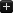
<style>
.page{position:relative;width:13px;height:14px}
.page>*{position:absolute;margin:0}
.t1{font:11.8px "TimesNewRomanPSMT";color:#dbdbdb}
</style>
<div class="page">
<p class="t1" style="left:3px;top:3px;width:7px;height:7px">+</p>
</div>
